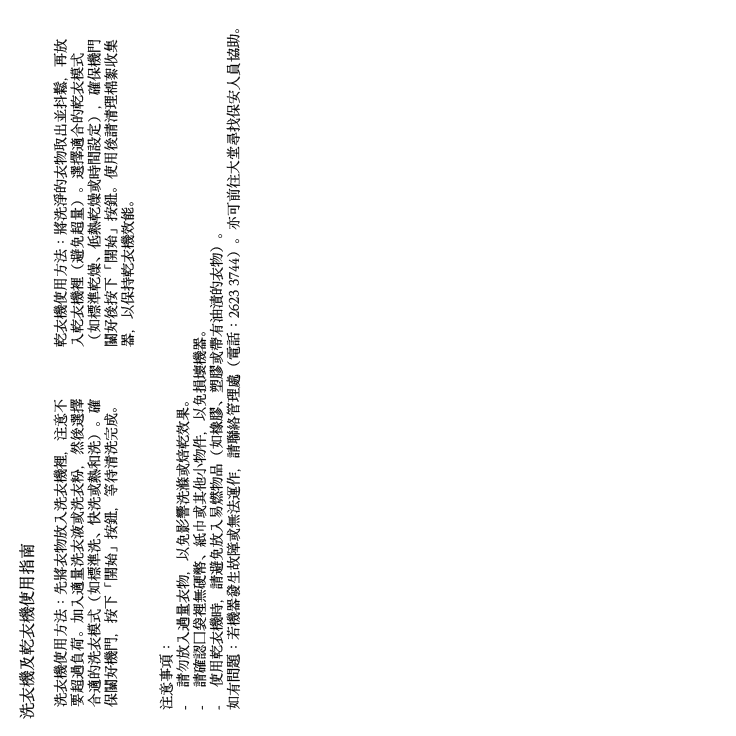
<style>
.page{position:relative;width:736px;height:736px;background:#ffffff}
.page>*{position:absolute;margin:0}
.t1{font:14px "HinaMincho-Regular";color:#000000}
.t2{font:16px "HinaMincho-Regular";color:#000000}
</style>
<div class="page">
<p class="t1" style="left:159px;top:29px;width:82px;height:681px;rotate:-90deg">注意事項：<br>請勿放入過量衣物，以免影響洗滌或焙乾效果。<br>請確認口袋裡無硬幣、紙巾或其他小物件，以免損壞機器。<br>使用乾衣機時，請避免放入易燃物品（如橡膠、塑膠或帶有油漬的衣物）。<br>如有問題：若機器發生故障或無法運作，請聯絡管理處（電話：2623 3744）。亦可前往大堂尋找保安人員協助。</p>
<p class="t1" style="left:53px;top:39px;width:82px;height:308px;rotate:-90deg">乾衣機使用方法：將洗淨的衣物取出並抖鬆，再放入乾衣機裡（避免超量）。選擇適合的乾衣模式<br>（如標準乾燥、低熱乾燥或時間設定），確保機門關好後按下「開始」按鈕。使用後請清理棉絮收集器，以保持乾衣機效能。</p>
<p class="t1" style="left:53px;top:399px;width:66px;height:308px;rotate:-90deg">洗衣機使用方法：先將衣物放入洗衣機裡，注意不要超過負荷。加入適量洗衣液或洗衣粉，然後選擇合適的洗衣模式（如標準洗、快洗或熱和洗）。確保關好機門，按下「開始」按鈕，等待清洗完成。</p>
<p class="t2" style="left:18px;top:543px;width:17px;height:176px;rotate:-90deg">洗衣機及乾衣機使用指南</p>
</div>
